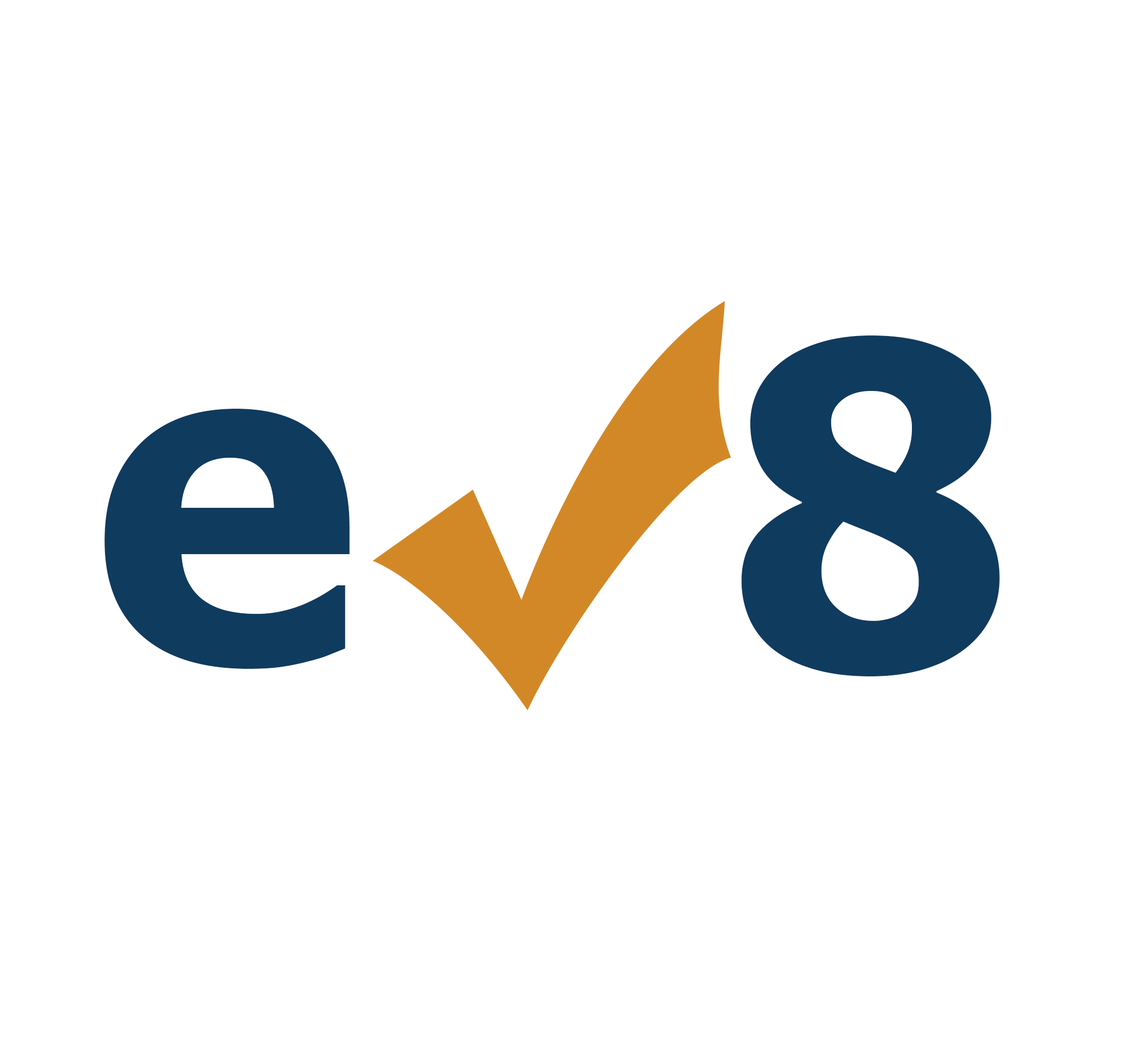
<style>
.page{position:relative;width:1129px;height:1056px;background:#ffffff}
.page>*{position:absolute;margin:0}
.t1{font:448.9px "Tahoma-Bold";color:#0f3b5f}
</style>
<div class="page">
<p class="t1" style="left:741px;top:336px;width:259px;height:341px">8</p>
<p class="t1" style="left:104px;top:409px;width:246px;height:260px">e</p>
</div>
